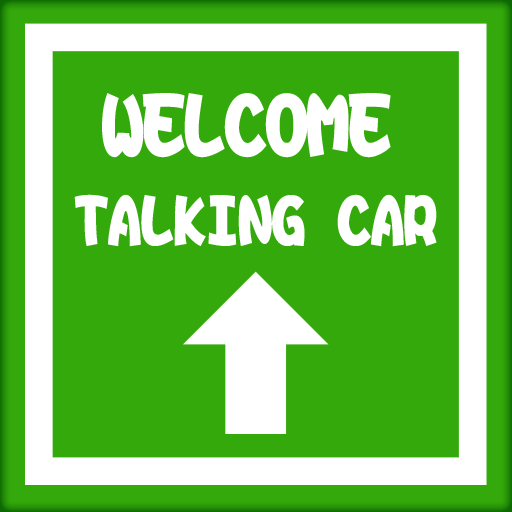
<style>
.page{position:relative;width:512px;height:512px;background:#34a90b}
.page>*{position:absolute;margin:0}
.t1{font:86.6px "DFHaiBaoW12-UB-HK-BF";letter-spacing:-0.025em;color:#ffffff}
.t2{font:69.3px "DFHaiBaoW12-UB-HK-BF";letter-spacing:-0.025em;color:#ffffff}
</style>
<div class="page">
<p class="t1" style="left:102px;top:93px;width:289px;height:65px">WELCOME</p>
<p class="t2" style="left:74px;top:194px;width:363px;height:53px">TALKING CAR</p>
</div>
